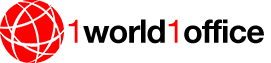
<style>
.page{position:relative;width:271px;height:63px;background:#ffffff}
.page>*{position:absolute;margin:0}
.t1{font:32.5px "HelveticaNeue-Bold";letter-spacing:-0.03em;color:#000000}
.t2{font:32.5px "HelveticaNeue";letter-spacing:-0.03em;color:#ff0000}
</style>
<div class="page">
<p class="t1" style="left:68px;top:19px;width:97px;height:25px"><span class="t2">1</span>world</p>
<p class="t1" style="left:168px;top:19px;width:96px;height:25px"><span class="t2">1</span>office</p>
</div>
